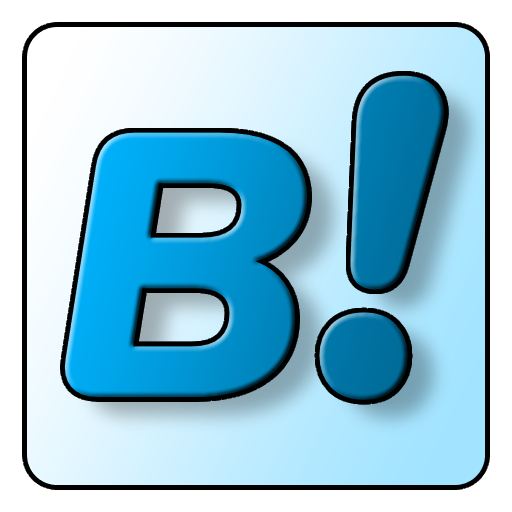
<style>
.page{position:relative;width:512px;height:512px}
.page>*{position:absolute;margin:0}
.t1{font:375px "Nunito-BlackItalic"}
.t2{font:450px "Nunito-BlackItalic"}
</style>
<div class="page">
<p class="t1" style="left:62px;top:75px;width:387px;height:325px">B<span class="t2">!</span></p>
</div>
